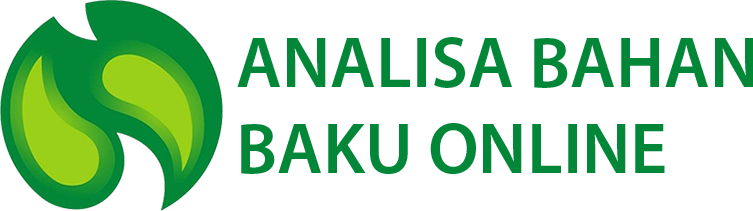
<style>
.page{position:relative;width:753px;height:211px;background:#ffffff}
.page>*{position:absolute;margin:0}
.t1{font:72px "MyriadPro-Semibold";color:#028738}
</style>
<div class="page">
<p class="t1" style="left:237px;top:37px;width:517px;height:137px">ANALISA BAHAN<br>BAKU ONLINE</p>
</div>
